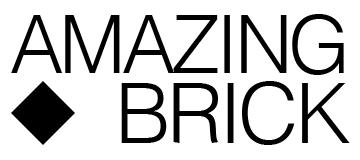
<style>
.page{position:relative;width:360px;height:160px;background:#ffffff}
.page>*{position:absolute;margin:0}
.t1{font:80px/52px "Helvetica-Light";letter-spacing:-0.05em;color:#000000}
.t2{font:84px/70px "Helvetica-Light";letter-spacing:-0.05em;color:#000000}
</style>
<div class="page">
<p class="t1" style="left:11px;top:14px;width:339px;height:131px;text-align:right">AMAZING<br><span class="t2">BRICK</span></p>
</div>
